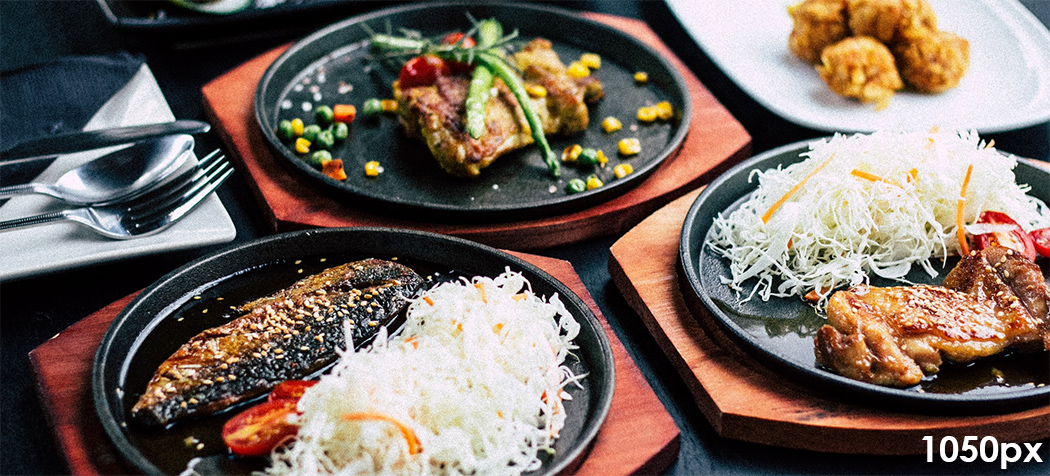
<style>
.page{position:relative;width:1050px;height:476px}
.page>*{position:absolute;margin:0}
.t1{font:36px "CenturyGothic-Bold";color:#ffffff}
</style>
<div class="page">
<p class="t1" style="left:922px;top:436px;width:121px;height:33px">1050px</p>
</div>
